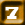
<style>
.page{position:relative;width:25px;height:25px}
.page>*{position:absolute;margin:0}
.t1{font:17.9px "Rockwell-ExtraBold";color:#ffffff;scale:1.33 1}
</style>
<div class="page">
<p class="t1" style="left:5px;top:7px;width:14px;height:12px">7</p>
</div>
